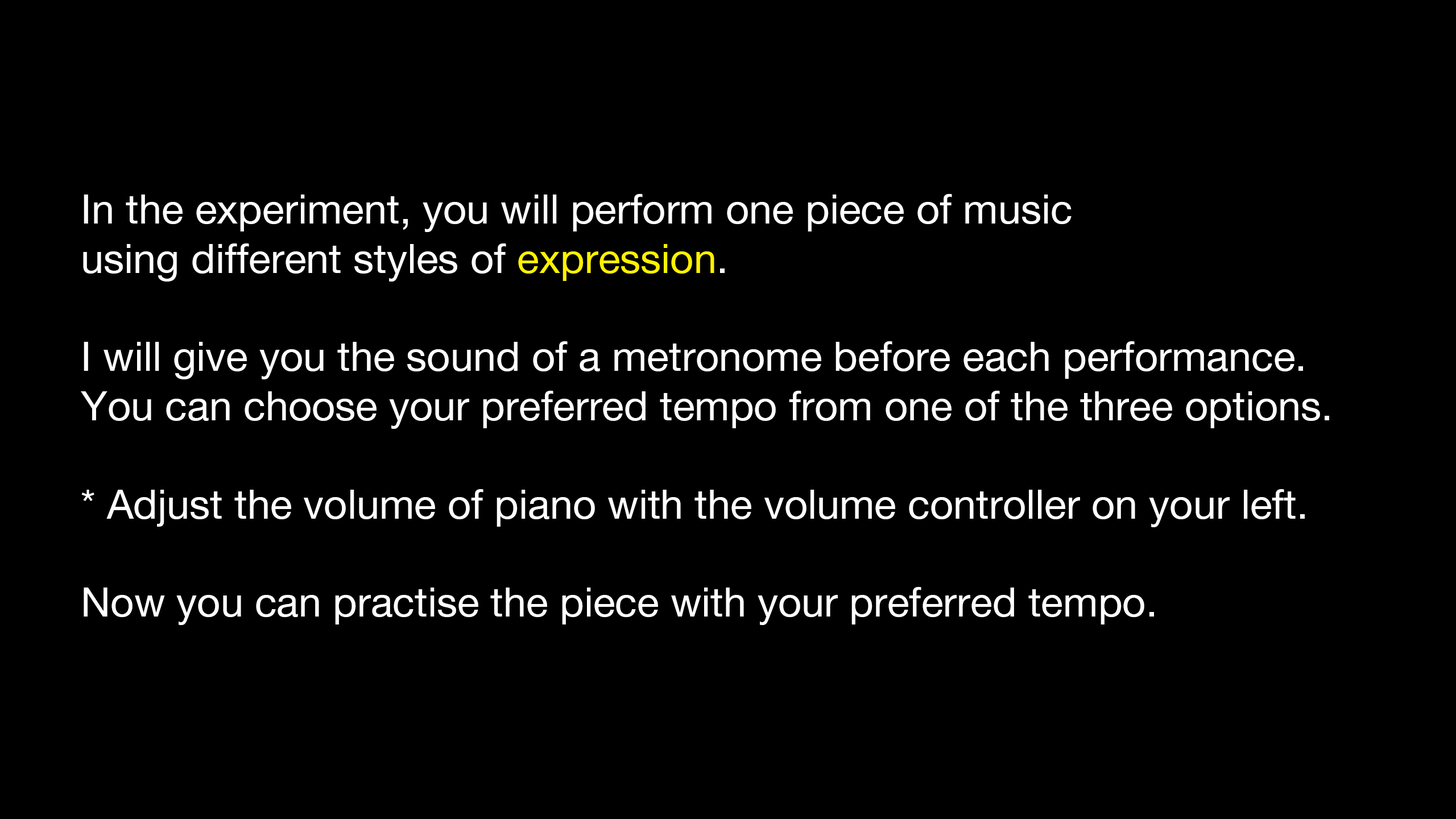
<style>
.page{position:relative;width:1456px;height:819px;background:#000000}
.page>*{position:absolute;margin:0}
.t1{font:40.9px "HelveticaNeue";color:#ffffff}
.t2{font:40.9px "HelveticaNeue";color:#fff200}
</style>
<div class="page">
<p class="t1" style="left:81px;top:194px;width:1248px;height:431px">In the experiment, you will perform one piece of music<br>using different styles of <span class="t2">expression</span>.<br><br>I will give you the sound of a metronome before each performance. <br>You can choose your preferred tempo from one of the three options.<br><br>* Adjust the volume of piano with the volume controller on your left.<br><br>Now you can practise the piece with your preferred tempo.</p>
</div>
